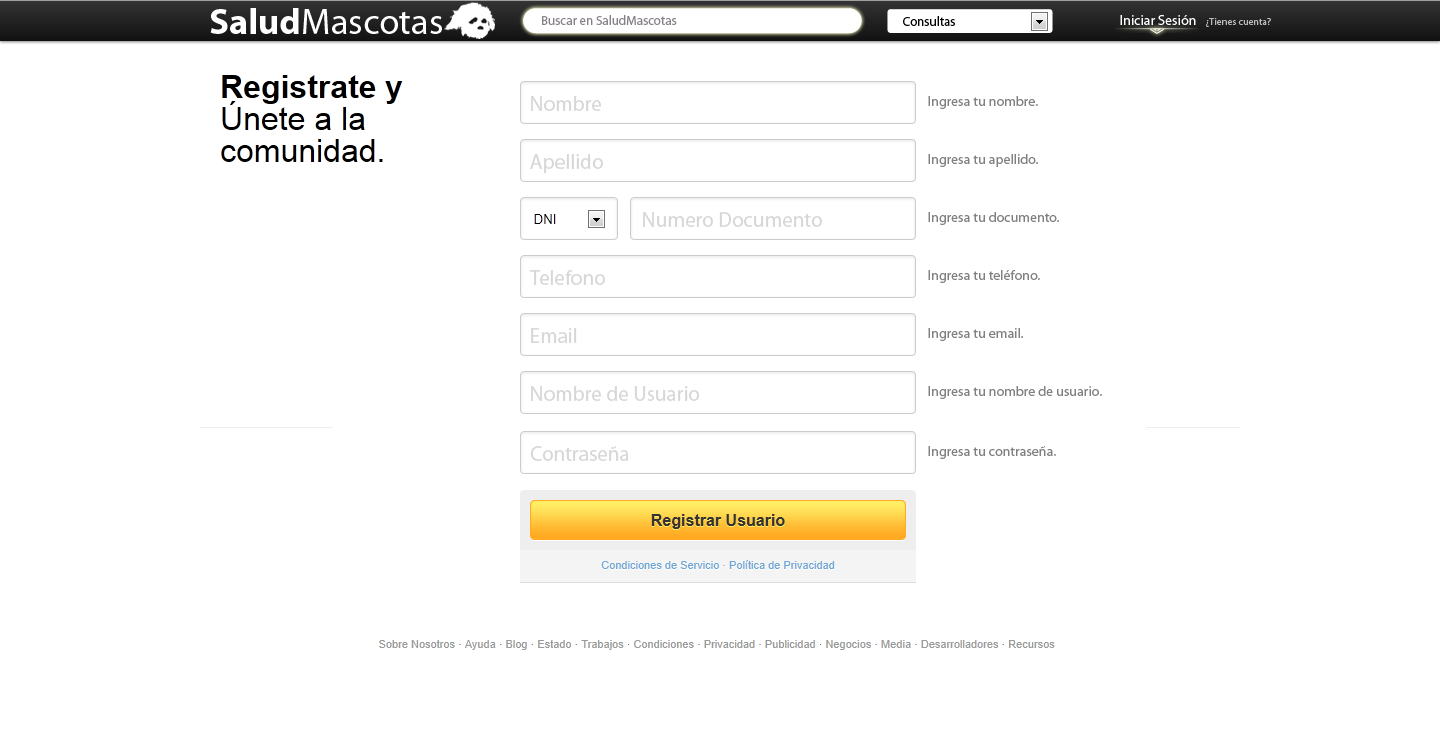
<style>
.page{position:relative;width:1440px;height:750px;background:#ffffff}
.page>*{position:absolute;margin:0}
.t1{font:36.6px "MyriadPro-Regular";color:#ffffff}
.t2{font:36.6px "MyriadPro-Bold";color:#ffffff}
.t3{font:13px "MyriadPro-Regular";color:#878088}
.t4{font:13px "MyriadPro-Regular";color:#000000}
.t5{font:14px "MyriadPro-Regular";color:#ffffff}
.t6{font:10px "MyriadPro-Regular";color:#bababa}
.t7{font:21px "MyriadPro-Regular";color:#d6d6d6}
.t8{font:14px "MyriadPro-Regular";color:#808080}
</style>
<div class="page">
<p class="t1" style="left:210px;top:8px;width:232px;height:26px"><span class="t2">Salud</span>Mascotas</p>
<p class="t3" style="left:542px;top:15px;width:135px;height:10px">Buscar en SaludMascotas</p>
<p class="t4" style="left:903px;top:16px;width:52px;height:10px">Consultas</p>
<p class="t5" style="left:1120px;top:15px;width:76px;height:10px">Iniciar Sesión</p>
<p class="t6" style="left:1206px;top:18px;width:65px;height:9px">¿Tienes cuenta?</p>
<p class="t7" style="left:531px;top:96px;width:70px;height:15px">Nombre</p>
<p class="t8" style="left:928px;top:96px;width:110px;height:13px">Ingresa tu nombre.</p>
<p class="t7" style="left:530px;top:154px;width:73px;height:19px">Apellido</p>
<p class="t8" style="left:928px;top:154px;width:110px;height:13px">Ingresa tu apellido.</p>
<p class="t7" style="left:643px;top:212px;width:179px;height:15px">Numero Documento</p>
<p class="t8" style="left:928px;top:212px;width:131px;height:13px">Ingresa tu documento.</p>
<p class="t7" style="left:529px;top:270px;width:76px;height:15px">Telefono</p>
<p class="t8" style="left:928px;top:270px;width:112px;height:13px">Ingresa tu teléfono.</p>
<p class="t7" style="left:531px;top:328px;width:46px;height:15px">Email</p>
<p class="t8" style="left:928px;top:328px;width:95px;height:13px">Ingresa tu email.</p>
<p class="t7" style="left:531px;top:386px;width:169px;height:15px">Nombre de Usuario</p>
<p class="t8" style="left:928px;top:386px;width:174px;height:13px">Ingresa tu nombre de usuario.</p>
<p class="t7" style="left:530px;top:446px;width:99px;height:15px">Contraseña</p>
<p class="t8" style="left:928px;top:446px;width:128px;height:13px">Ingresa tu contraseña.</p>
</div>
